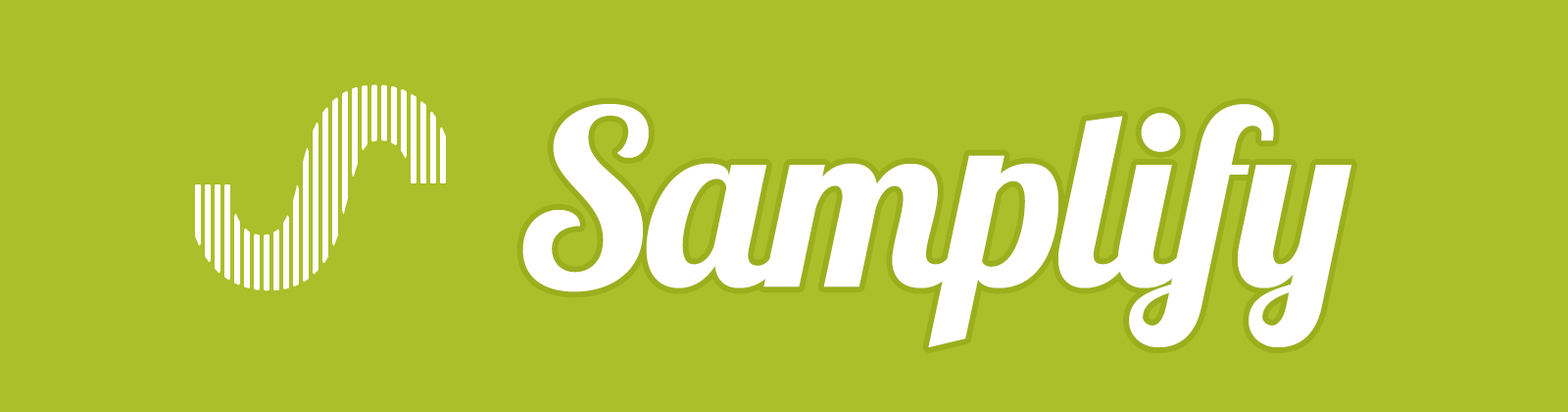
<style>
.page{position:relative;width:1568px;height:412px;background:#aabf29}
.page>*{position:absolute;margin:0}
.t1{font:243px "Lobster1.4";letter-spacing:-0.02em;color:#ffffff}
</style>
<div class="page">
<p class="t1" style="left:522px;top:104px;width:829px;height:243px">Samplify</p>
</div>
